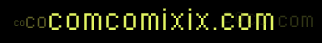
<style>
.page{position:relative;width:322px;height:43px;background:#000000}
.page>*{position:absolute;margin:0}
.t1{font:24px "Supertext03";letter-spacing:0.025em;color:#e3f661}
.t2{font:8px "Supertext03";letter-spacing:0.025em;color:#575d25}
.t3{font:16px "Supertext03";letter-spacing:0.025em;color:#636428}
</style>
<div class="page">
<p class="t1" style="left:14px;top:8px;width:260px;height:22px"><span class="t2">co</span><span class="t3">co</span>comcomixix.com</p>
</div>
